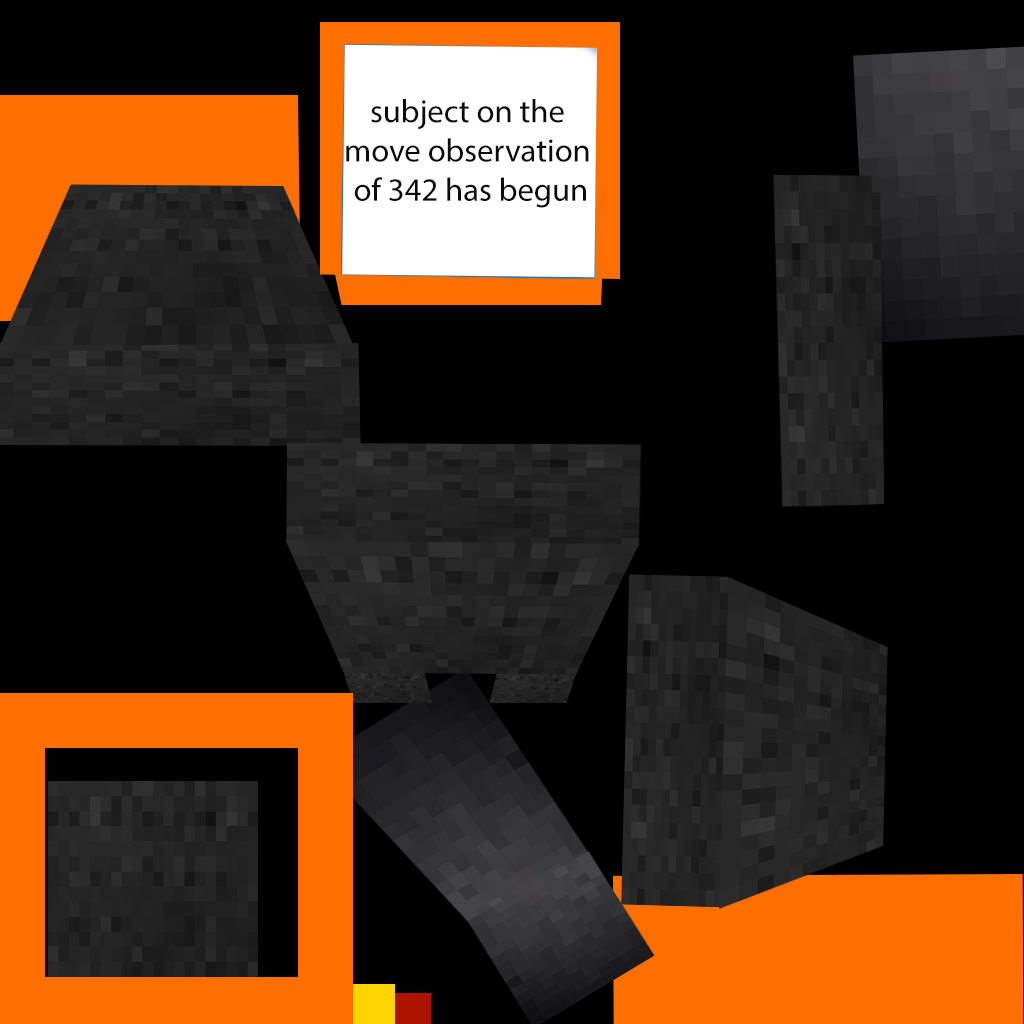
<style>
.page{position:relative;width:1024px;height:1024px;background:#000000}
.page>*{position:absolute;margin:0}
.t1{font:32.7px "MyriadPro-Regular";color:#0b0b0b}
</style>
<div class="page">
<p class="t1" style="left:346px;top:99px;width:243px;height:109px;text-align:center">subject on the <br>move observation <br>of 342 has begun</p>
</div>
